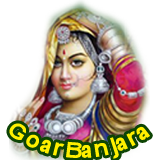
<style>
.page{position:relative;width:160px;height:160px;background:#ffffff}
.page>*{position:absolute;margin:0}
.t1{font:20.8px "Arial-BoldMT";color:#fff000}
</style>
<div class="page">
<p class="t1" style="left:9px;top:123px;width:141px;height:36px;text-align:center">GoarBanjara</p>
</div>
